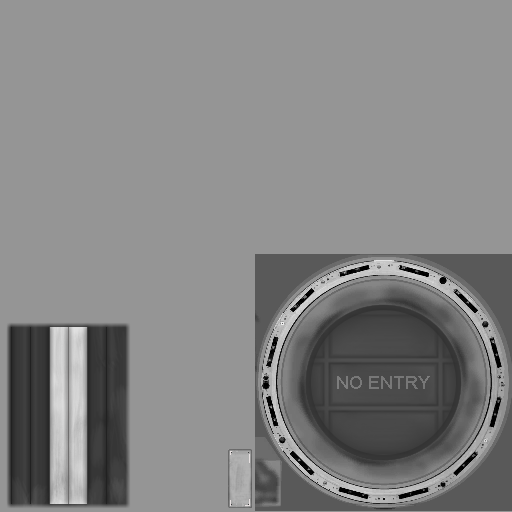
<style>
.page{position:relative;width:512px;height:512px;background:#959595}
.page>*{position:absolute;margin:0}
.t1{font:18px "ArialMT";color:#777777}
</style>
<div class="page">
<p class="t1" style="left:337px;top:376px;width:93px;height:13px">NO ENTRY</p>
</div>
